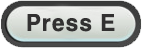
<style>
.page{position:relative;width:142px;height:48px}
.page>*{position:absolute;margin:0}
.t1{font:22px "HYgtrE";color:#323131}
</style>
<div class="page">
<p class="t1" style="left:27px;top:14px;width:88px;height:18px">Press E</p>
</div>
